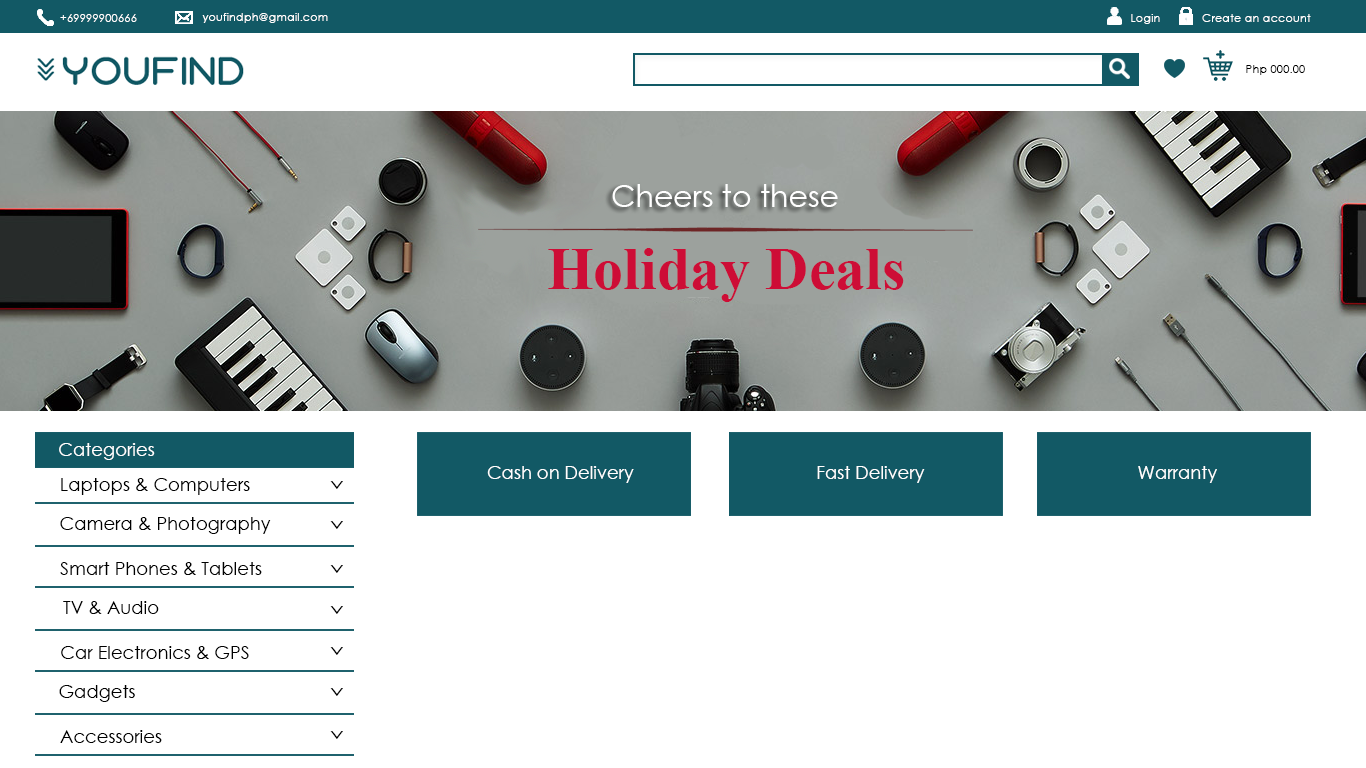
<style>
.page{position:relative;width:1366px;height:768px;background:#ffffff}
.page>*{position:absolute;margin:0}
.t1{font:11.2px "CenturyGothic";color:#ffffff;scale:1.03 1}
.t2{font:11.2px "CenturyGothic";color:#000000;scale:1.03 1}
.t3{font:18px "CenturyGothic";color:#ffffff}
.t4{font:18px "CenturyGothic";color:#000000}
.t5{font:14.6px "CenturyGothic";color:#000000;scale:1.73 1}
</style>
<div class="page">
<p class="t1" style="left:60px;top:14px;width:77px;height:8px">+69999900666</p>
<p class="t1" style="left:202px;top:13px;width:126px;height:10px">youfindph@gmail.com</p>
<p class="t1" style="left:1131px;top:14px;width:29px;height:10px">Login</p>
<p class="t1" style="left:1202px;top:14px;width:109px;height:8px">Create an account</p>
<p class="t2" style="left:1246px;top:65px;width:59px;height:10px">Php 000.00</p>
<p class="t3" style="left:59px;top:443px;width:96px;height:17px">Categories</p>
<p class="t3" style="left:487px;top:466px;width:147px;height:17px">Cash on Delivery</p>
<p class="t3" style="left:817px;top:466px;width:108px;height:17px">Fast Delivery</p>
<p class="t3" style="left:1138px;top:466px;width:79px;height:17px">Warranty</p>
<p class="t4" style="left:61px;top:478px;width:189px;height:17px">Laptops &amp; Computers</p>
<p class="t5" style="left:330px;top:481px;width:13px;height:8px">v</p>
<p class="t4" style="left:60px;top:517px;width:211px;height:17px">Camera &amp; Photography</p>
<p class="t5" style="left:330px;top:521px;width:13px;height:8px">v</p>
<p class="t4" style="left:60px;top:562px;width:202px;height:13px">Smart Phones &amp; Tablets</p>
<p class="t5" style="left:330px;top:565px;width:13px;height:8px">v</p>
<p class="t4" style="left:63px;top:601px;width:96px;height:13px">TV &amp; Audio</p>
<p class="t5" style="left:330px;top:606px;width:13px;height:8px">v</p>
<p class="t4" style="left:61px;top:646px;width:188px;height:13px">Car Electronics &amp; GPS</p>
<p class="t5" style="left:330px;top:647px;width:13px;height:8px">v</p>
<p class="t4" style="left:59px;top:685px;width:76px;height:17px">Gadgets</p>
<p class="t5" style="left:330px;top:688px;width:13px;height:8px">v</p>
<p class="t4" style="left:60px;top:730px;width:102px;height:13px">Accessories</p>
<p class="t5" style="left:330px;top:731px;width:13px;height:8px">v</p>
</div>
